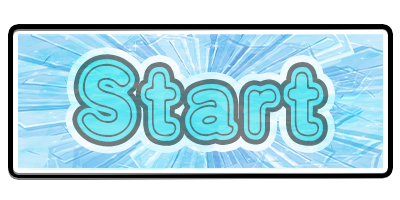
<style>
.page{position:relative;width:400px;height:200px;background:#ffffff}
.page>*{position:absolute;margin:0}
.t1{font:108.3px "DokiDokiFantasia";color:#6ce7f2}
</style>
<div class="page">
<p class="t1" style="left:77px;top:59px;width:247px;height:83px">Start</p>
</div>
